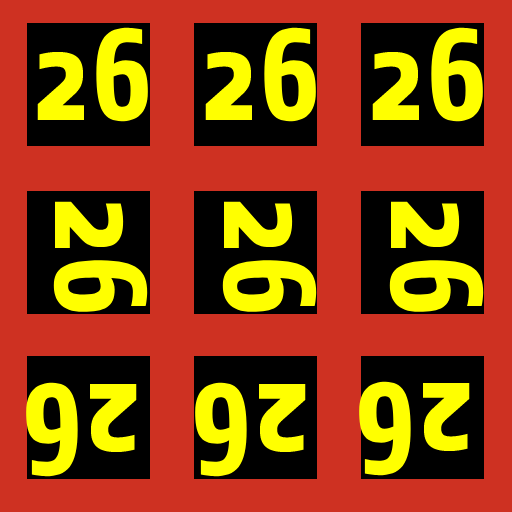
<style>
.page{position:relative;width:512px;height:512px;background:#ce3122}
.page>*{position:absolute;margin:0}
.t1{font:130px "Share-BoldOSF";color:#ffff00}
</style>
<div class="page">
<p class="t1" style="left:37px;top:27px;width:111px;height:95px">26</p>
<p class="t1" style="left:205px;top:27px;width:111px;height:95px">26</p>
<p class="t1" style="left:372px;top:27px;width:111px;height:95px">26</p>
<p class="t1" style="left:53px;top:201px;width:95px;height:111px;rotate:90deg">26</p>
<p class="t1" style="left:222px;top:201px;width:95px;height:111px;rotate:90deg">26</p>
<p class="t1" style="left:389px;top:201px;width:95px;height:111px;rotate:90deg">26</p>
<p class="t1" style="left:26px;top:382px;width:111px;height:95px;rotate:-180deg">26</p>
<p class="t1" style="left:195px;top:382px;width:111px;height:95px;rotate:-180deg">26</p>
<p class="t1" style="left:359px;top:381px;width:111px;height:95px;rotate:-180deg">26</p>
</div>
